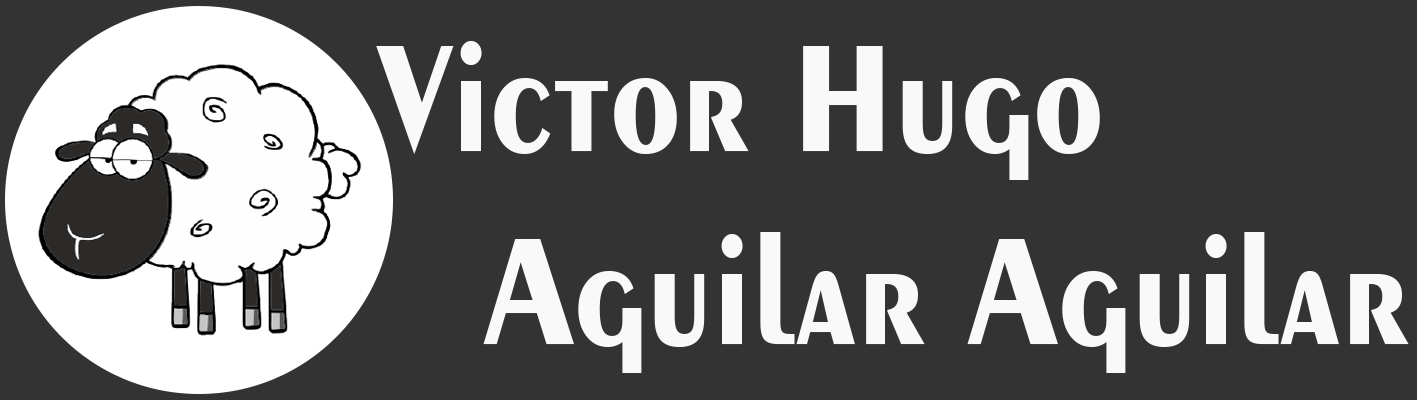
<style>
.page{position:relative;width:1417px;height:400px;background:#333333}
.page>*{position:absolute;margin:0}
.t1{font:160.5px "Exotic350BT-Bold";color:#f9f9f9;scale:0.88 1}
</style>
<div class="page">
<p class="t1" style="left:376px;top:41px;width:1033px;height:332px">Victor Hugo <br> Aguilar Aguilar</p>
</div>
